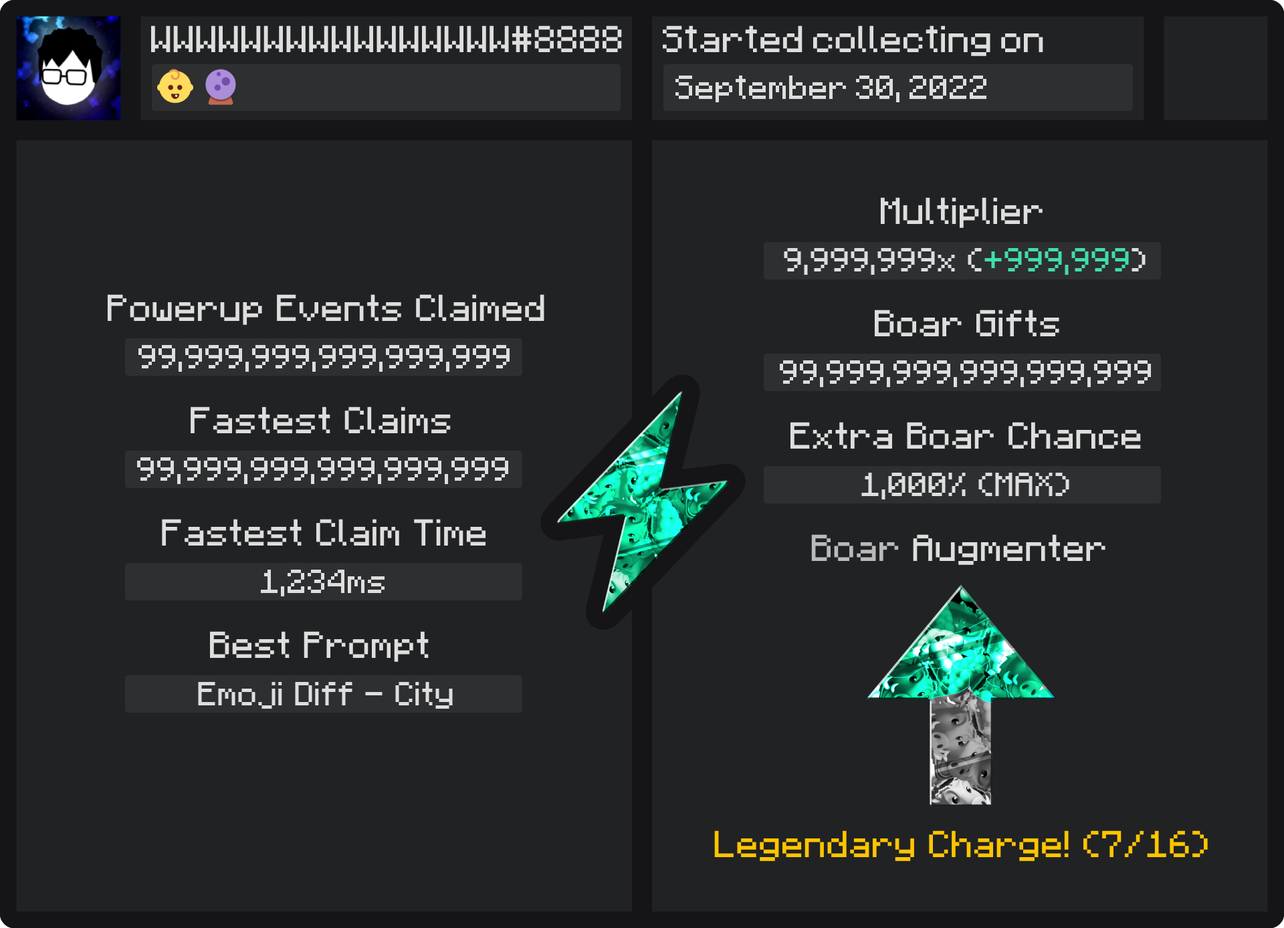
<style>
.page{position:relative;width:1284px;height:928px;background:#212224}
.page>*{position:absolute;margin:0}
.t1{font:30.1px "Minecraft";color:#dedede}
.t2{font:26.8px "Minecraft";color:#dedede}
.t3{font:30.1px "F77-Minecraft";color:#dedede}
.t4{font:26.8px "F77-Minecraft";color:#dedede}
.t5{font:26.8px "F77-Minecraft";color:#40dea9}
.t6{font:30.1px "F77-Minecraft";color:#bababa}
.t7{font:30.1px "F77-Minecraft";color:#ffc500}
</style>
<div class="page">
<p class="t1" style="left:151px;top:25px;width:471px;height:28px">WWWWWWWWWWWWWWWW#8888</p>
<p class="t1" style="left:663px;top:25px;width:381px;height:31px">Started collecting on</p>
<p class="t2" style="left:676px;top:76px;width:311px;height:26px">September 30, 2022</p>
<p class="t3" style="left:881px;top:197px;width:162px;height:31px">Multiplier</p>
<p class="t4" style="left:784px;top:247px;width:362px;height:28px">9,999,999x (<span class="t5">+999,999</span>)</p>
<p class="t3" style="left:107px;top:294px;width:437px;height:31px">Powerup Events Claimed</p>
<p class="t3" style="left:875px;top:310px;width:185px;height:26px">Boar Gifts</p>
<p class="t4" style="left:138px;top:345px;width:372px;height:27px">99,999,999,999,999,999</p>
<p class="t4" style="left:780px;top:361px;width:371px;height:26px">99,999,999,999,999,999</p>
<p class="t3" style="left:191px;top:407px;width:260px;height:26px">Fastest Claims</p>
<p class="t3" style="left:791px;top:422px;width:350px;height:27px">Extra Boar Chance</p>
<p class="t4" style="left:137px;top:458px;width:371px;height:26px">99,999,999,999,999,999</p>
<p class="t4" style="left:862px;top:473px;width:208px;height:27px">1,000% (MAX)</p>
<p class="t3" style="left:162px;top:519px;width:324px;height:27px">Fastest Claim Time</p>
<p class="t3" style="left:811px;top:534px;width:295px;height:31px"><span class="t6">Boar </span>Augmenter</p>
<p class="t4" style="left:261px;top:570px;width:124px;height:27px">1,234ms</p>
<p class="t3" style="left:210px;top:631px;width:219px;height:31px">Best Prompt</p>
<p class="t4" style="left:198px;top:682px;width:255px;height:27px">Emoji Diff - City</p>
<p class="t7" style="left:714px;top:831px;width:494px;height:31px">Legendary Charge! (7/16)</p>
</div>
